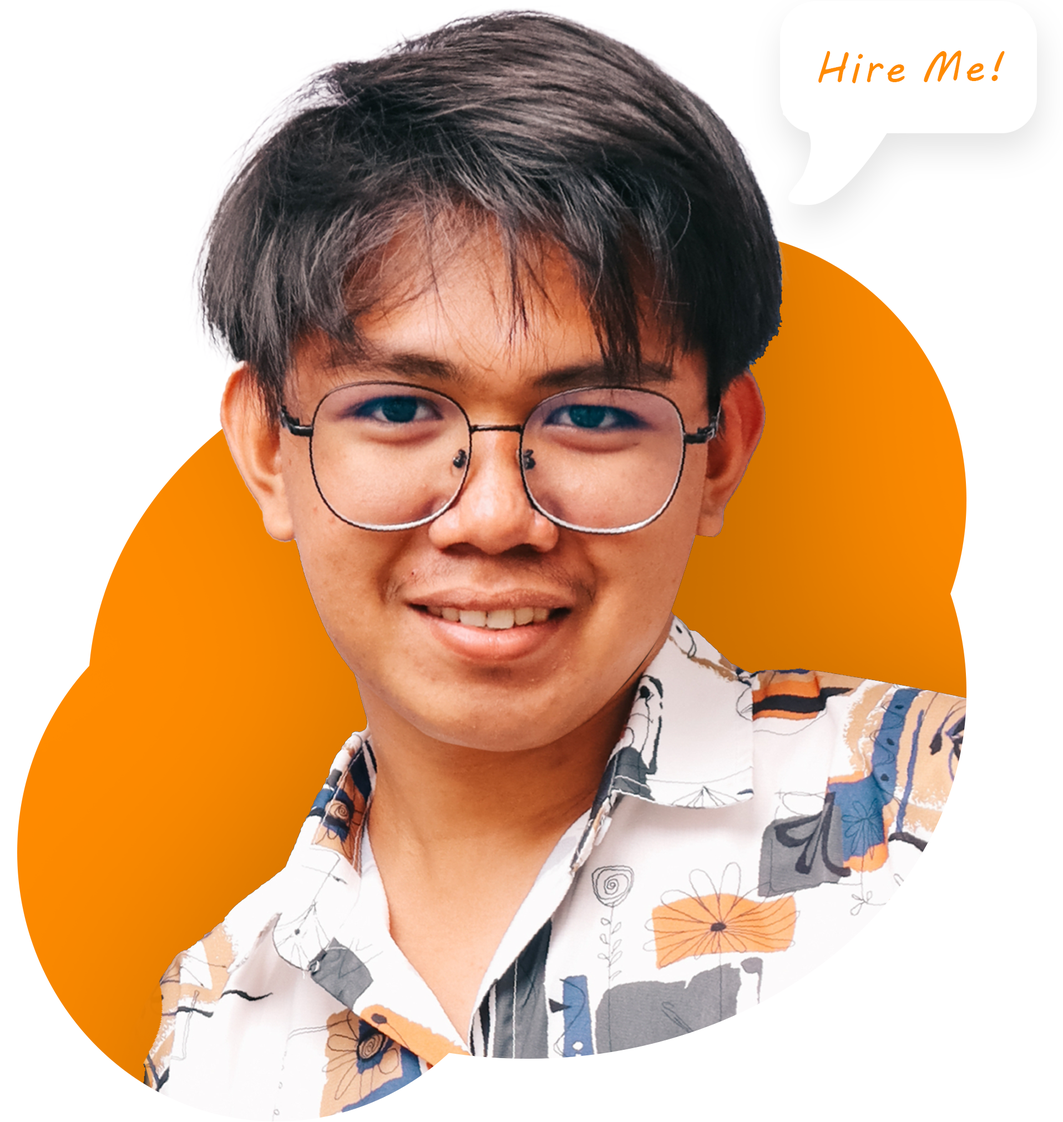
<style>
.page{position:relative;width:1063px;height:1122px;background:#ffffff}
.page>*{position:absolute;margin:0}
.t1{font:41.6px "MVBoli";letter-spacing:0.1em;color:#ff8b00}
</style>
<div class="page">
<p class="t1" style="left:819px;top:51px;width:86px;height:32px">Hire</p>
<p class="t1" style="left:924px;top:50px;width:81px;height:32px">Me!</p>
</div>
